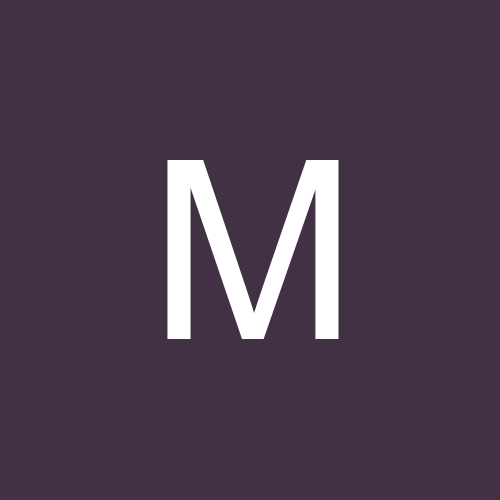
<style>
.page{position:relative;width:500px;height:500px;background:#423144}
.page>*{position:absolute;margin:0}
.t1{font:250px "ArialMT";color:#ffffff}
</style>
<div class="page">
<p class="t1" style="left:167px;top:160px;width:172px;height:179px">M</p>
</div>
